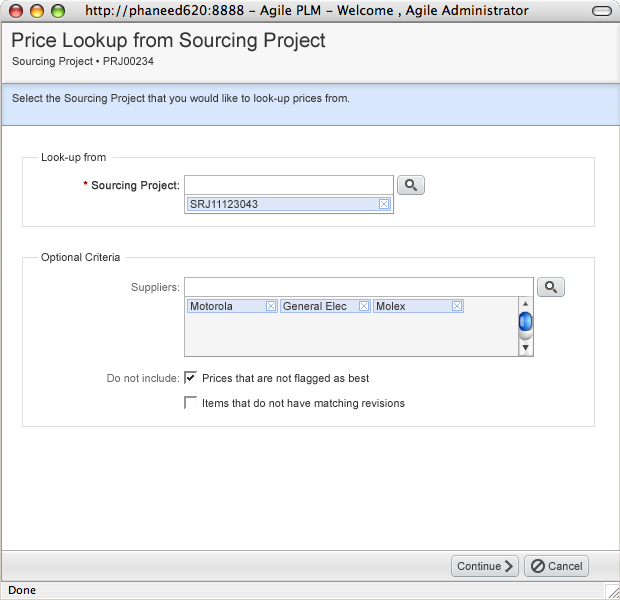
<style>
.page{position:relative;width:620px;height:600px;background:#ffffff}
.page>*{position:absolute;margin:0}
.t1{font:20px "ArialMT";color:#333333}
.t2{font:11px "ArialMT";color:#333333}
.t3{font:11px "ArialMT";color:#333333;font-weight:bold}
.t4{font:11px "ArialMT";color:#990000;font-weight:bold}
.t5{font:11px "ArialMT";color:#666666}
</style>
<div class="page">
<p class="t1" style="left:12px;top:32px;width:314px;height:20px">Price Lookup from Sourcing Project</p>
<p class="t2" style="left:12px;top:57px;width:142px;height:11px">Sourcing Project • PRJ00234</p>
<p class="t2" style="left:12px;top:94px;width:337px;height:11px">Select the Sourcing Project that you would like to look-up prices from.</p>
<p class="t2" style="left:42px;top:153px;width:64px;height:11px">Look-up from</p>
<p class="t3" style="left:83px;top:181px;width:96px;height:11px"><span class="t4">* </span>Sourcing Project:</p>
<p class="t2" style="left:190px;top:200px;width:68px;height:8px">SRJ11123043</p>
<p class="t2" style="left:41px;top:253px;width:79px;height:11px">Optional Criteria</p>
<p class="t5" style="left:131px;top:283px;width:48px;height:11px">Suppliers:</p>
<p class="t2" style="left:191px;top:302px;width:42px;height:8px">Motorola</p>
<p class="t2" style="left:283px;top:302px;width:64px;height:8px">General Elec</p>
<p class="t2" style="left:377px;top:302px;width:29px;height:8px">Molex</p>
<p class="t5" style="left:107px;top:374px;width:72px;height:8px">Do not include:</p>
<p class="t2" style="left:203px;top:374px;width:166px;height:11px">Prices that are not flagged as best</p>
<p class="t2" style="left:203px;top:399px;width:202px;height:11px">Items that do not have matching revisions</p>
<p class="t2" style="left:457px;top:562px;width:44px;height:8px">Continue</p>
<p class="t2" style="left:548px;top:562px;width:34px;height:8px">Cancel</p>
</div>
